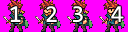
<style>
.page{position:relative;width:128px;height:32px;background:#ff00ff}
.page>*{position:absolute;margin:0}
.t1{font:24px "Consolas";color:#ffffff}
</style>
<div class="page">
<p class="t1" style="left:10px;top:6px;width:114px;height:17px">1  2 3  4</p>
</div>
